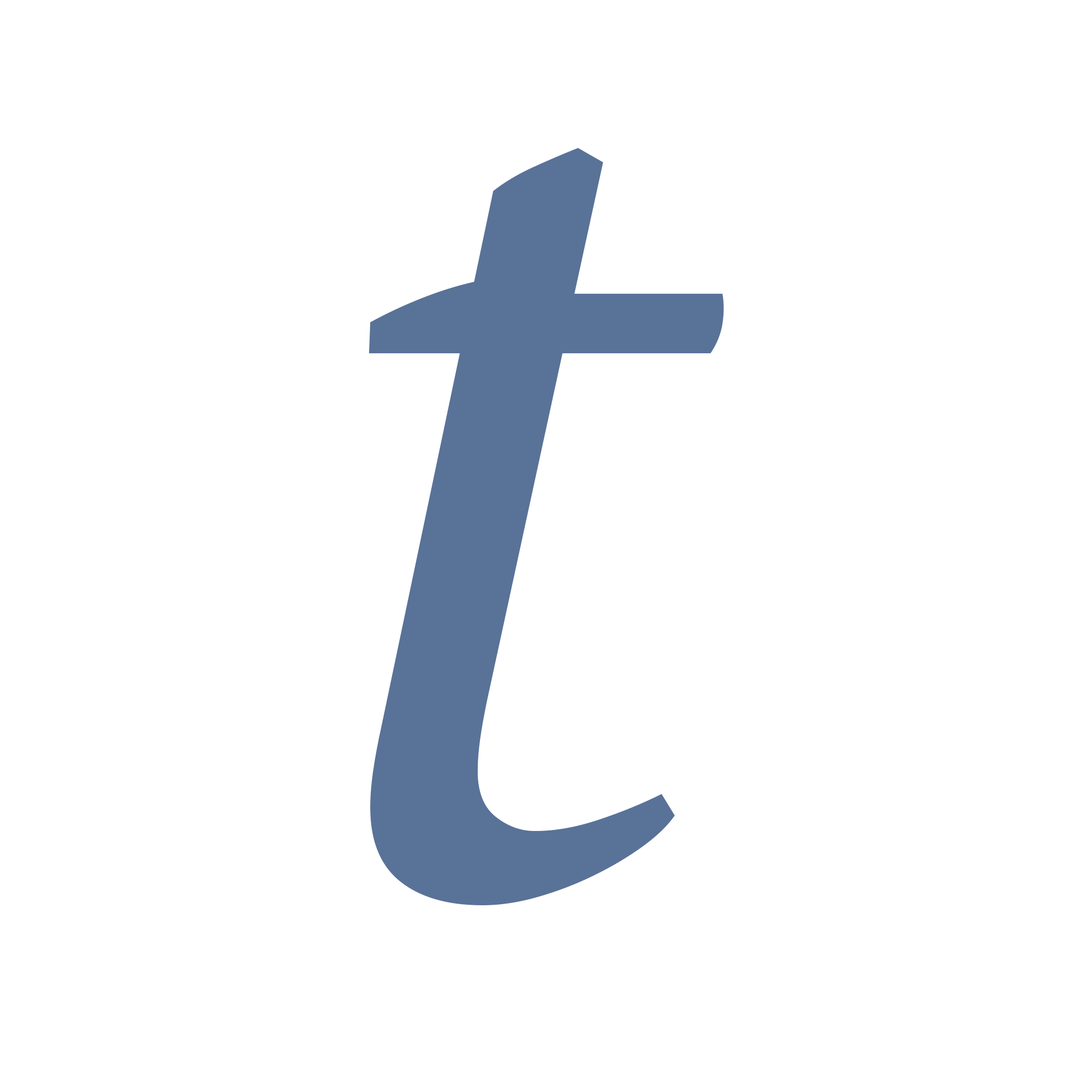
<style>
.page{position:relative;width:1092px;height:1092px;background:#ffffff}
.page>*{position:absolute;margin:0}
.t1{font:1194.3px "PTSerif-Italic";color:#597298}
</style>
<div class="page">
<p class="t1" style="left:369px;top:148px;width:355px;height:757px">t</p>
</div>
